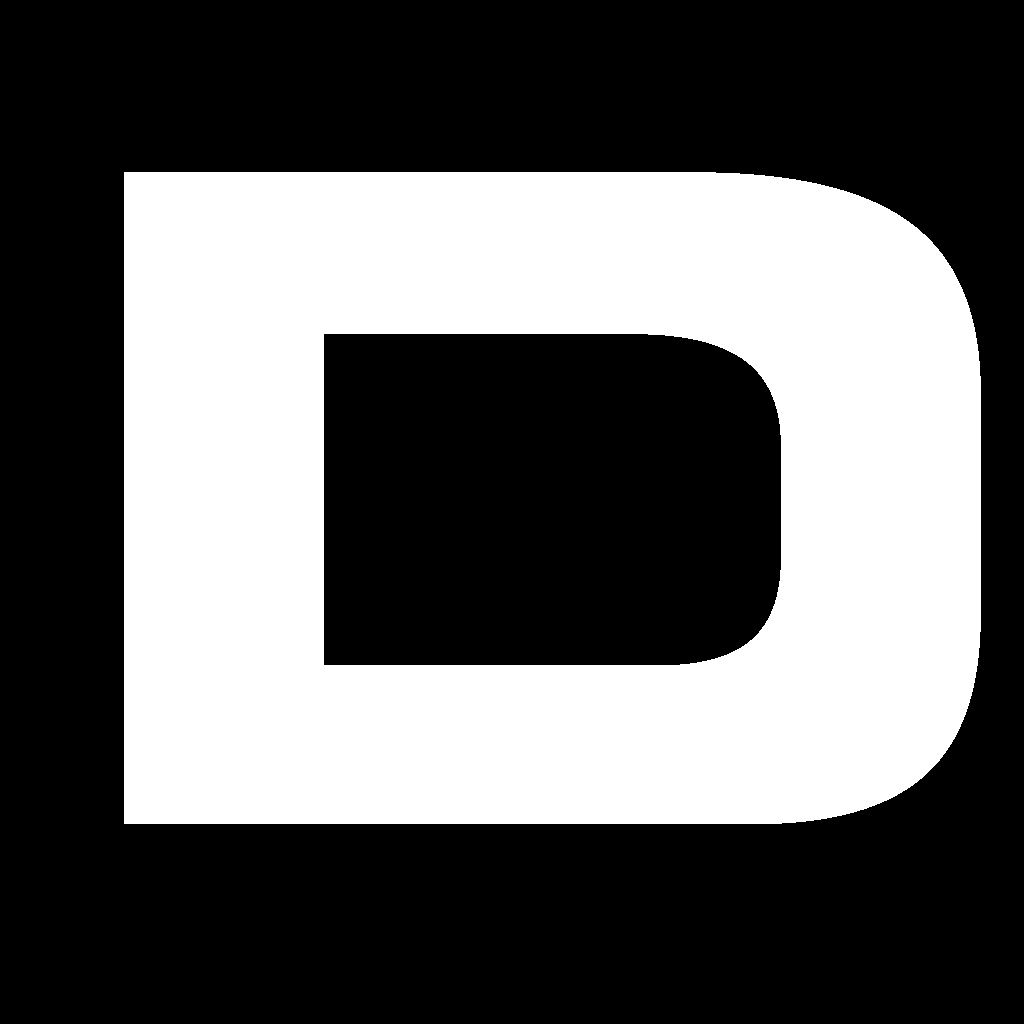
<style>
.page{position:relative;width:1024px;height:1024px;background:#000000}
.page>*{position:absolute;margin:0}
.t1{font:895.8px "Square721BT-BoldExtended";color:#ffffff}
</style>
<div class="page">
<p class="t1" style="left:124px;top:172px;width:857px;height:652px">D</p>
</div>
